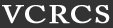
<style>
.page{position:relative;width:113px;height:28px;background:#333333}
.page>*{position:absolute;margin:0}
.t1{font:24.6px "ACaslonPro-Regular";letter-spacing:0.025em;color:#ffffff;font-weight:bold;scale:1.23 1}
</style>
<div class="page">
<p class="t1" style="left:2px;top:5px;width:108px;height:19px">VCRCS</p>
</div>
